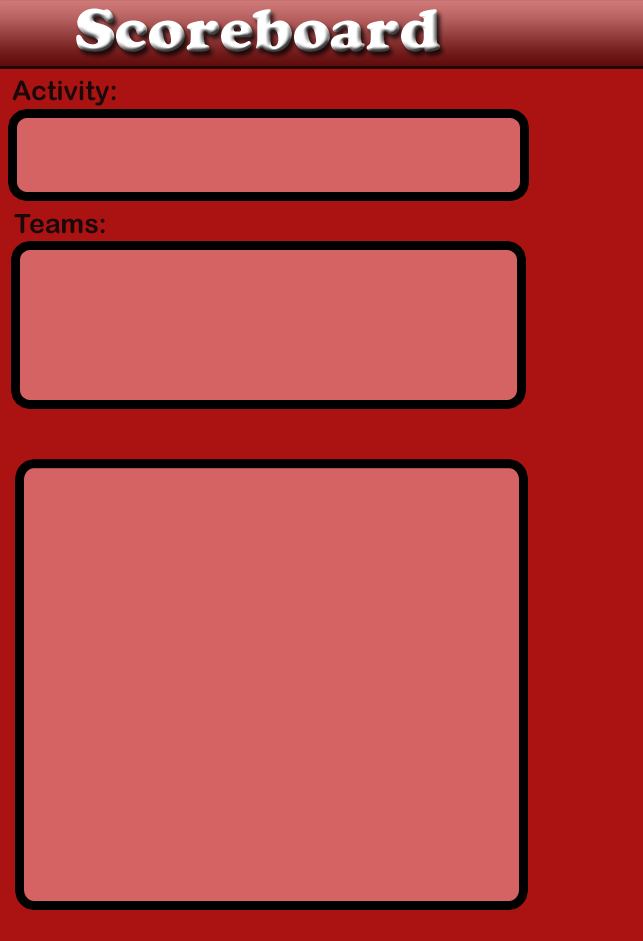
<style>
.page{position:relative;width:643px;height:941px;background:#d56363}
.page>*{position:absolute;margin:0}
.t1{font:59.7px "CooperBlackStd"}
.t2{font:26.7px "ArialRoundedMTBold";color:#1b0909}
</style>
<div class="page">
<p class="t1" style="left:76px;top:8px;width:365px;height:44px">Scoreboard</p>
<p class="t2" style="left:12px;top:80px;width:104px;height:26px">Activity:</p>
<p class="t2" style="left:14px;top:214px;width:91px;height:20px">Teams:</p>
</div>
